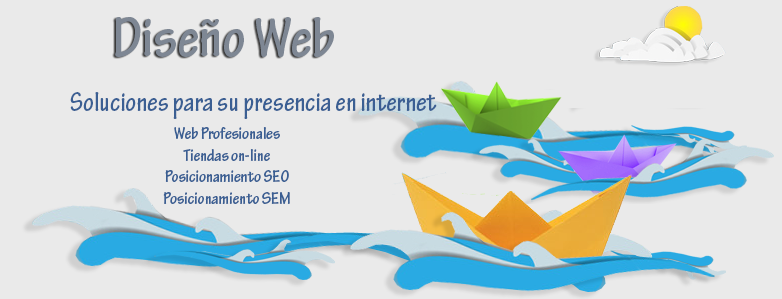
<style>
.page{position:relative;width:782px;height:299px;background:#eaeaea}
.page>*{position:absolute;margin:0}
.t1{font:60px "TektonPro-BoldCond";color:#7e8794}
.t2{font:28px "TektonPro-BoldCond";color:#3b5f93}
.t3{font:18px "TektonPro-BoldCond";color:#3b5f93}
</style>
<div class="page">
<p class="t1" style="left:115px;top:17px;width:219px;height:40px">Diseño Web</p>
<p class="t2" style="left:70px;top:92px;width:367px;height:27px">Soluciones para su presencia en internet</p>
<p class="t3" style="left:163px;top:127px;width:127px;height:77px;text-align:center">Web Profesionales<br>Tiendas on-line<br>Posicionamiento SEO<br>Posicionamiento SEM</p>
</div>
